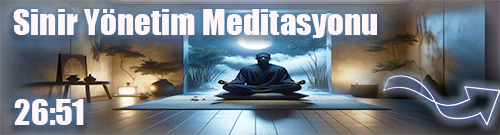
<style>
.page{position:relative;width:500px;height:135px}
.page>*{position:absolute;margin:0}
.t1{font:33.3px "Impact";color:#f5f6f8}
</style>
<div class="page">
<p class="t1" style="left:13px;top:9px;width:364px;height:29px">Sinir Yönetim Meditasyonu</p>
<p class="t1" style="left:14px;top:99px;width:70px;height:26px">26:51</p>
</div>
